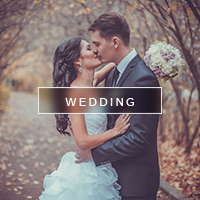
<style>
.page{position:relative;width:200px;height:200px}
.page>*{position:absolute;margin:0}
.t1{font:11.9px "IstokWeb-Regular";letter-spacing:0.2em;color:#ffffff;text-transform:uppercase}
</style>
<div class="page">
<p class="t1" style="left:65px;top:98px;width:69px;height:8px">WEDDING</p>
</div>
